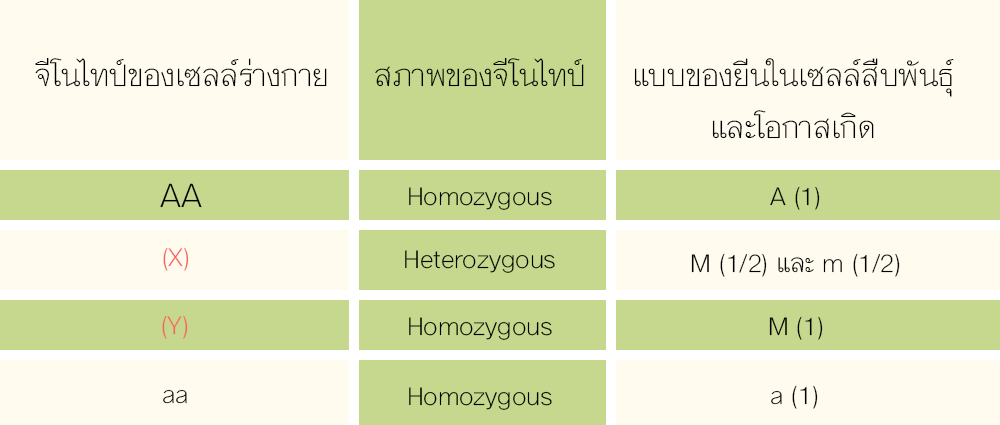
<style>
.page{position:relative;width:1000px;height:425px;background:#fffcef}
.page>*{position:absolute;margin:0}
.t1{font:42.9px "MNPaethai-Light";color:#000000}
.t2{font:48px "MNPaethai-Light";color:#000000}
.t3{font:36px "MNPaethai-Light";color:#000000}
.t4{font:36px "MNPaethai-Light";color:#f96161}
</style>
<div class="page">
<p class="t1" style="left:35px;top:58px;width:292px;height:29px">จีโนไทป์ของเซลล์ร่างกาย</p>
<p class="t1" style="left:375px;top:58px;width:209px;height:29px">สภาพของจีโนไทป์</p>
<p class="t1" style="left:634px;top:58px;width:320px;height:81px;text-align:center">แบบของยีนในเซลล์สืบพันธุ์<br>และโอกาสเกิด</p>
<p class="t2" style="left:160px;top:183px;width:42px;height:25px">AA</p>
<p class="t3" style="left:409px;top:187px;width:143px;height:23px">Homozygous</p>
<p class="t3" style="left:770px;top:186px;width:50px;height:24px">A (1)</p>
<p class="t4" style="left:163px;top:247px;width:26px;height:24px">(X)</p>
<p class="t3" style="left:405px;top:250px;width:150px;height:23px">Heterozygous</p>
<p class="t3" style="left:691px;top:253px;width:209px;height:24px">M (1/2) และ m (1/2)</p>
<p class="t4" style="left:162px;top:315px;width:26px;height:24px">(Y)</p>
<p class="t3" style="left:409px;top:317px;width:143px;height:23px">Homozygous</p>
<p class="t3" style="left:769px;top:316px;width:54px;height:24px">M (1)</p>
<p class="t3" style="left:163px;top:389px;width:24px;height:15px">aa</p>
<p class="t3" style="left:409px;top:387px;width:143px;height:23px">Homozygous</p>
<p class="t3" style="left:771px;top:385px;width:47px;height:24px">a (1)</p>
</div>
